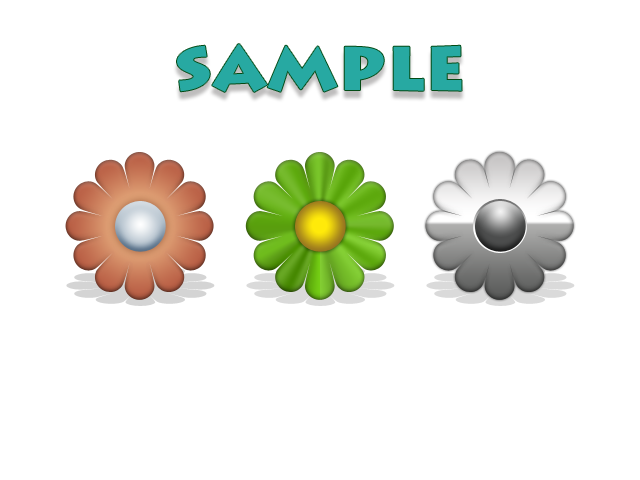
<style>
.page{position:relative;width:640px;height:480px;background:#ffffff}
.page>*{position:absolute;margin:0}
.t1{font:72px "LithosPro-Black";color:#27a9a2}
</style>
<div class="page">
<p class="t1" style="left:177px;top:44px;width:285px;height:48px">sample</p>
</div>
